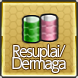
<style>
.page{position:relative;width:78px;height:78px}
.page>*{position:absolute;margin:0}
.t1{font:15px/10px "UDShinGoPro-Regular";letter-spacing:-0.08em;color:#ffffff;scale:0.9 1}
</style>
<div class="page">
<p class="t1" style="left:12px;top:44px;width:54px;height:29px;text-align:center">Resuplai/<br>Dermaga</p>
</div>
